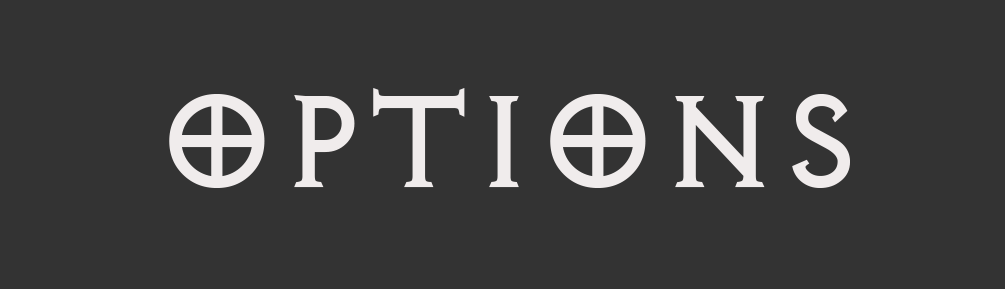
<style>
.page{position:relative;width:1005px;height:289px;background:#333333}
.page>*{position:absolute;margin:0}
.t1{font:150px "AvQest";color:#f0ecec}
</style>
<div class="page">
<p class="t1" style="left:169px;top:88px;width:681px;height:100px">OPTIONS</p>
</div>
